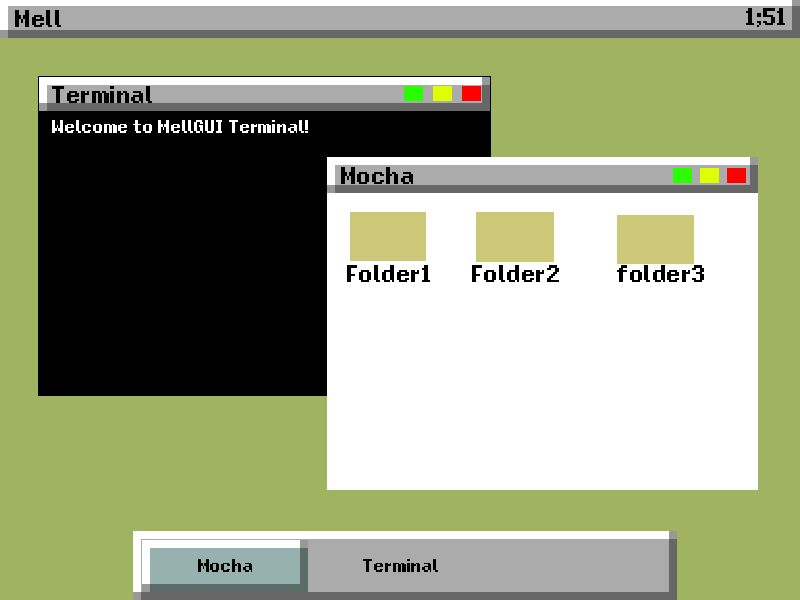
<style>
.page{position:relative;width:800px;height:600px;background:#9fb360}
.page>*{position:absolute;margin:0}
.t1{font:33.3px "Nihonium113";color:#000000}
.t2{font:25px "Nihonium113";color:#ffffff}
.t3{font:25px "Nihonium113";color:#000000}
</style>
<div class="page">
<p class="t1" style="left:15px;top:10px;width:46px;height:17px">Mell</p>
<p class="t1" style="left:746px;top:8px;width:39px;height:19px">1;51</p>
<p class="t1" style="left:52px;top:86px;width:100px;height:17px">Terminal</p>
<p class="t2" style="left:52px;top:120px;width:256px;height:13px">Welcome to MellGUI Terminal!</p>
<p class="t1" style="left:341px;top:167px;width:72px;height:17px">Mocha</p>
<p class="t1" style="left:347px;top:265px;width:83px;height:17px">Folder1</p>
<p class="t1" style="left:472px;top:265px;width:87px;height:17px">Folder2</p>
<p class="t1" style="left:617px;top:265px;width:87px;height:17px">folder3</p>
<p class="t3" style="left:198px;top:559px;width:54px;height:13px">Mocha</p>
<p class="t3" style="left:363px;top:559px;width:75px;height:13px">Terminal</p>
</div>
